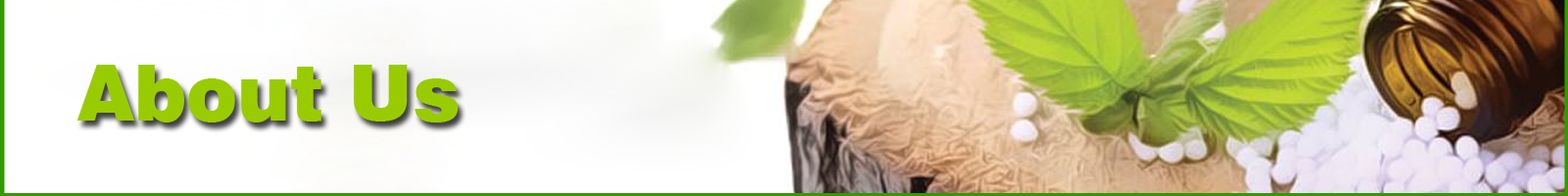
<style>
.page{position:relative;width:1568px;height:196px}
.page>*{position:absolute;margin:0}
.t1{font:77.5px "Swiss721BT-Black";color:#99cc00}
</style>
<div class="page">
<p class="t1" style="left:76px;top:65px;width:383px;height:57px">About Us</p>
</div>
